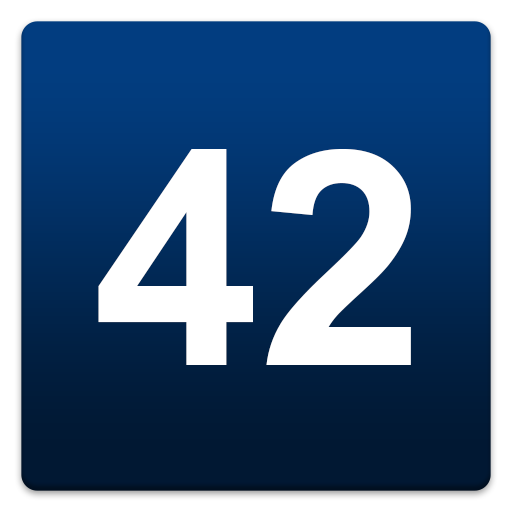
<style>
.page{position:relative;width:512px;height:512px;background:#ffffff}
.page>*{position:absolute;margin:0}
.t1{font:300px "Arial-BoldMT";color:#ffffff}
</style>
<div class="page">
<p class="t1" style="left:98px;top:149px;width:313px;height:216px">42</p>
</div>
